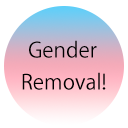
<style>
.page{position:relative;width:128px;height:128px;background:#ffffff}
.page>*{position:absolute;margin:0}
.t1{font:20.8px "KozGoPr6N-Regular";color:#000000}
</style>
<div class="page">
<p class="t1" style="left:29px;top:40px;width:68px;height:18px">Gender</p>
<p class="t1" style="left:22px;top:72px;width:84px;height:18px">Removal!</p>
</div>
